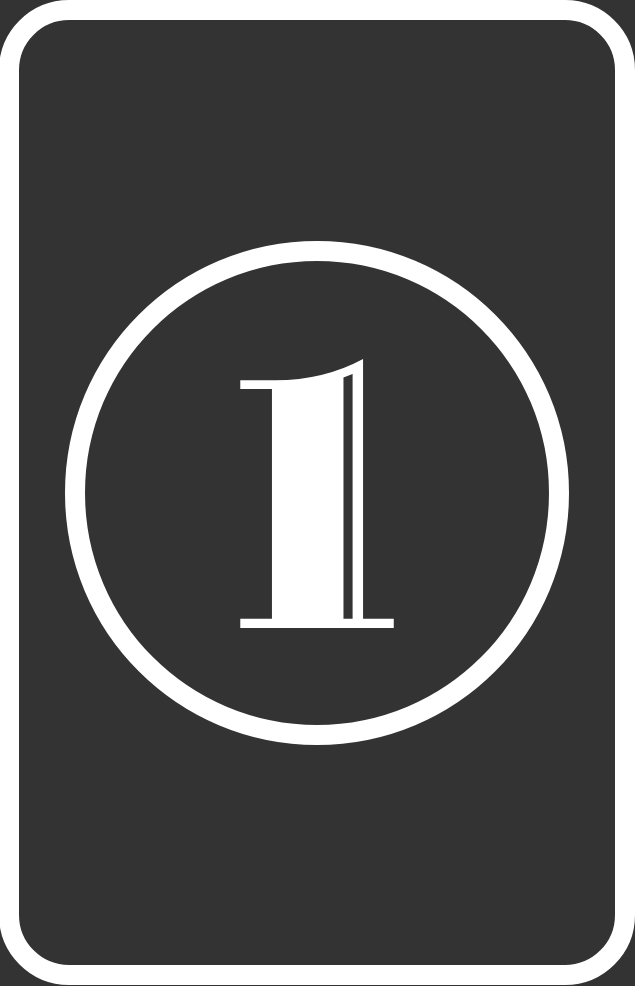
<style>
.page{position:relative;width:635px;height:986px;background:#333333}
.page>*{position:absolute;margin:0}
.t1{font:400px "BodoniHighlightICG";color:#ffffff}
</style>
<div class="page">
<p class="t1" style="left:240px;top:358px;width:154px;height:270px">1</p>
</div>
